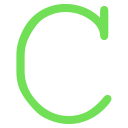
<style>
.page{position:relative;width:128px;height:128px;background:#ffffff}
.page>*{position:absolute;margin:0}
.t1{font:200px "CourierNewPSMT";color:#71e057}
</style>
<div class="page">
<p class="t1" style="left:16px;top:4px;width:96px;height:120px">C</p>
</div>
